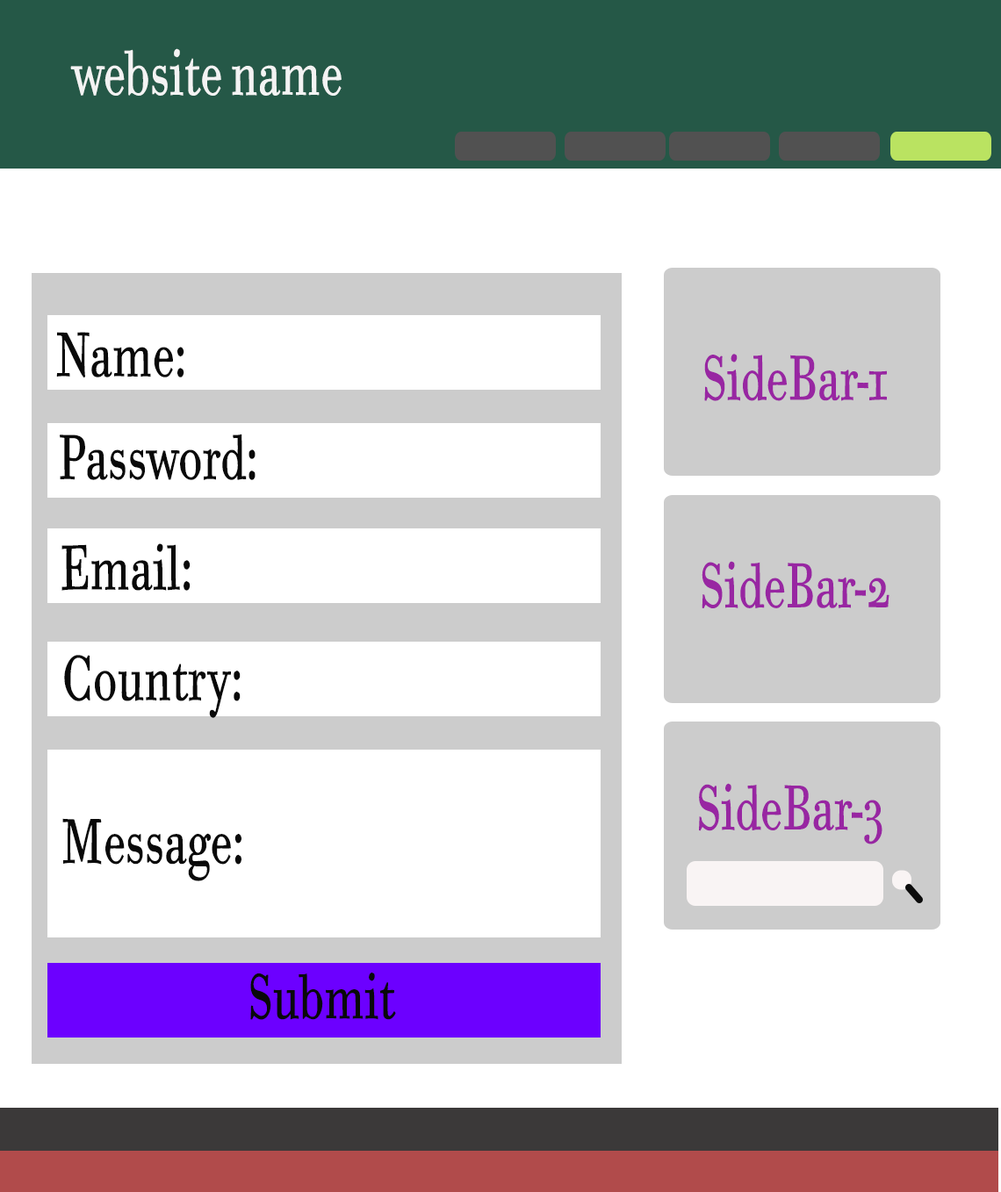
<style>
.page{position:relative;width:1001px;height:1192px;background:#ffffff}
.page>*{position:absolute;margin:0}
.t1{font:63.2px "BodoniSixOSITCTTBook";color:#f3f3f3;scale:0.67 1}
.t2{font:63.2px "BodoniSixOSITCTTBook";color:#090909;scale:0.67 1}
.t3{font:63.2px "BodoniSixOSITCTTBook";color:#9826a2;scale:0.67 1}
</style>
<div class="page">
<p class="t1" style="left:70px;top:48px;width:271px;height:48px">website name</p>
<p class="t2" style="left:56px;top:332px;width:128px;height:46px">Name:</p>
<p class="t3" style="left:704px;top:354px;width:182px;height:47px">SideBar-1</p>
<p class="t2" style="left:60px;top:434px;width:195px;height:46px">Password:</p>
<p class="t2" style="left:61px;top:543px;width:129px;height:48px">Email:</p>
<p class="t3" style="left:701px;top:561px;width:188px;height:47px">SideBar-2</p>
<p class="t2" style="left:64px;top:655px;width:176px;height:63px">Country:</p>
<p class="t3" style="left:699px;top:783px;width:183px;height:61px">SideBar-3</p>
<p class="t2" style="left:62px;top:818px;width:179px;height:63px">Message:</p>
<p class="t2" style="left:250px;top:972px;width:146px;height:48px">Submit</p>
</div>
